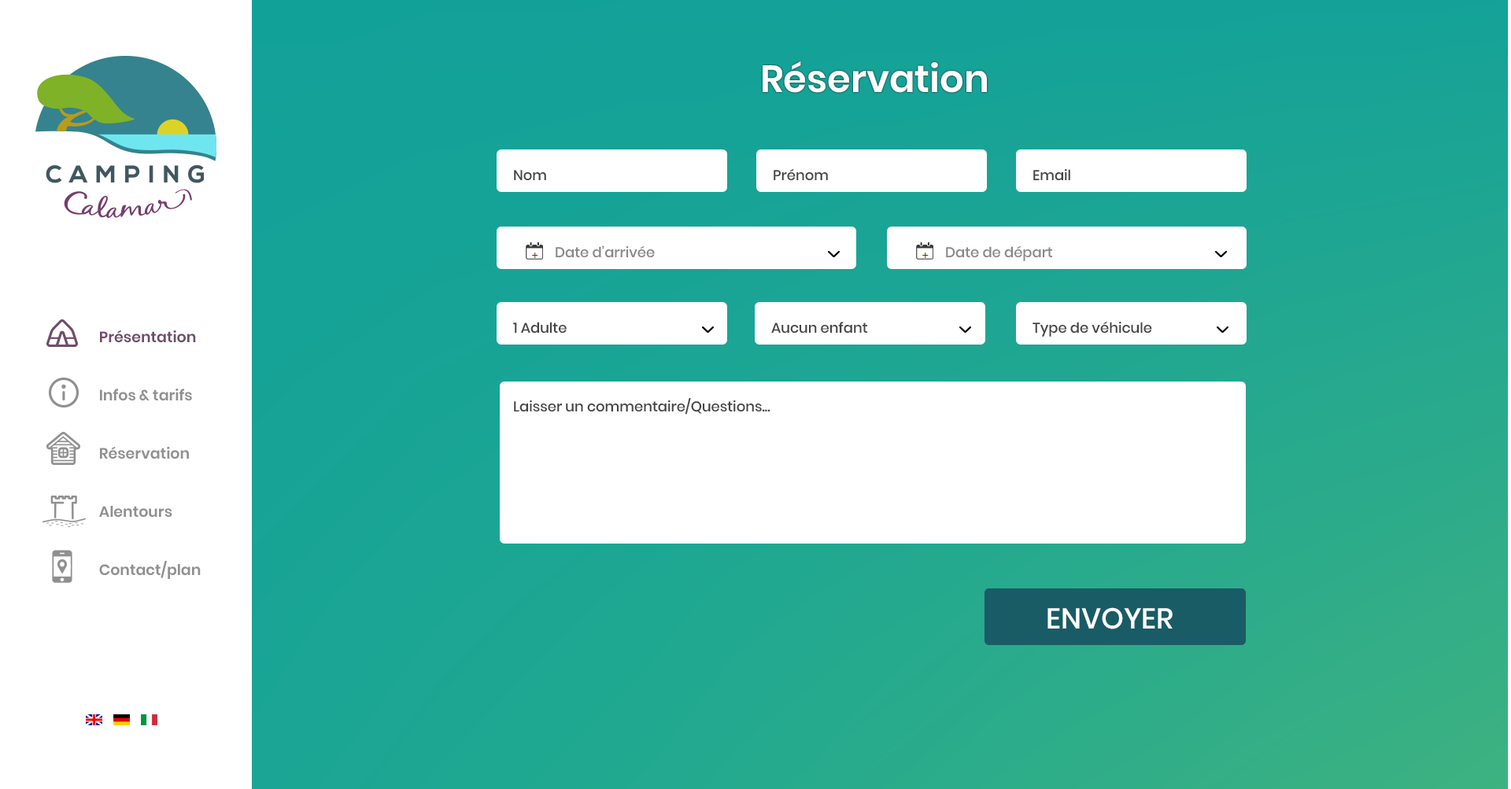
<style>
.page{position:relative;width:1511px;height:789px;background:#ffffff}
.page>*{position:absolute;margin:0}
.t1{font:37.8px "Poppins-SemiBold";color:#ffffff}
.t2{font:14.2px "Poppins-Medium";color:#444444}
.t3{font:14.2px "Poppins-Medium";color:#888888}
.t4{font:15px "Poppins-SemiBold";color:#6e4d6b}
.t5{font:15px "Poppins-SemiBold";color:#918f8f}
.t6{font:28.8px "Poppins-Medium";color:#ffffff}
</style>
<div class="page">
<p class="t1" style="left:762px;top:61px;width:225px;height:32px">Réservation</p>
<p class="t2" style="left:514px;top:170px;width:32px;height:11px">Nom</p>
<p class="t2" style="left:774px;top:168px;width:54px;height:13px">Prénom</p>
<p class="t2" style="left:1033px;top:168px;width:37px;height:13px">Email</p>
<p class="t3" style="left:556px;top:246px;width:99px;height:12px">Date d’arrivée</p>
<p class="t3" style="left:946px;top:246px;width:107px;height:15px">Date de départ</p>
<p class="t4" style="left:100px;top:330px;width:96px;height:13px">Présentation</p>
<p class="t2" style="left:513px;top:322px;width:54px;height:12px">1 Adulte</p>
<p class="t2" style="left:771px;top:322px;width:97px;height:12px">Aucun enfant</p>
<p class="t2" style="left:1032px;top:321px;width:120px;height:16px">Type de véhicule</p>
<p class="t5" style="left:100px;top:389px;width:92px;height:12px">Infos &amp; tarifs</p>
<p class="t2" style="left:514px;top:397px;width:256px;height:18px">Laisser un commentaire/Questions...</p>
<p class="t5" style="left:100px;top:446px;width:89px;height:14px">Réservation</p>
<p class="t5" style="left:99px;top:506px;width:73px;height:12px">Alentours</p>
<p class="t5" style="left:99px;top:561px;width:102px;height:18px">Contact/plan</p>
<p class="t6" style="left:1047px;top:607px;width:125px;height:23px">ENVOYER</p>
</div>
